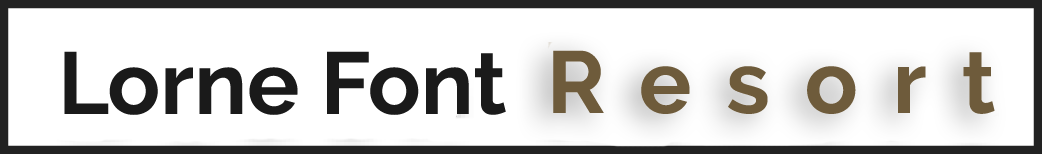
<style>
.page{position:relative;width:1042px;height:154px;background:#ffffff}
.page>*{position:absolute;margin:0}
.t1{font:87.5px "Raleway-Bold";color:#1a1a1a}
.t2{font:87.5px "Raleway-Bold";letter-spacing:0.4em;color:#6e5b3b}
</style>
<div class="page">
<p class="t1" style="left:64px;top:51px;width:442px;height:64px">Lorne Font</p>
<p class="t2" style="left:553px;top:50px;width:442px;height:64px">Resort</p>
</div>
